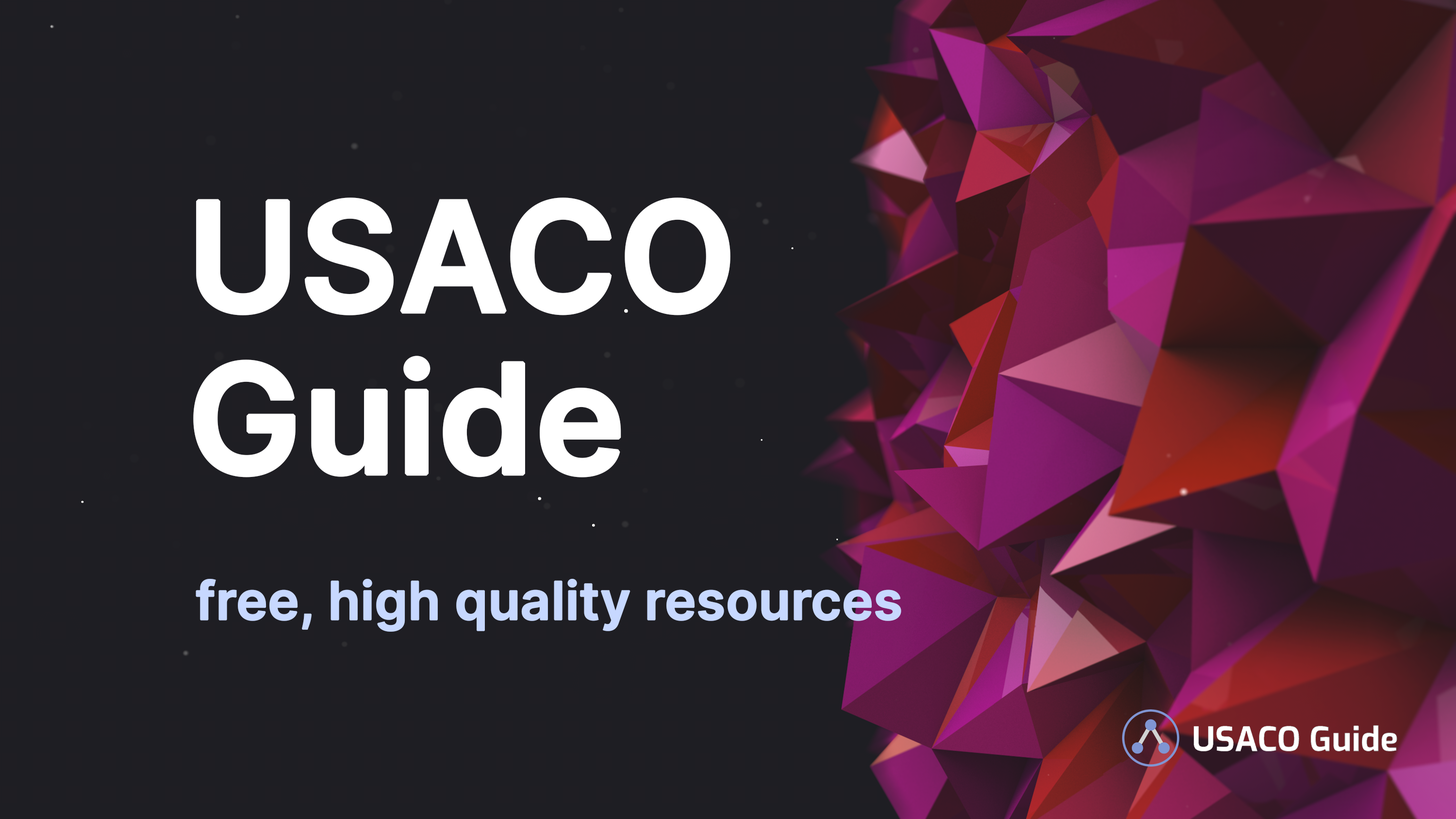
<style>
.page{position:relative;width:1456px;height:819px;background:#1e1e23}
.page>*{position:absolute;margin:0}
.t1{font:151.6px/161.8px "Inter-SemiBold";color:#ffffff;font-weight:bold}
.t2{font:52.6px "Inter-SemiBold";color:#c7d8ff;font-weight:bold}
</style>
<div class="page">
<p class="t1" style="left:193px;top:197px;width:537px;height:280px">USACO <br>Guide</p>
<p class="t2" style="left:196px;top:578px;width:705px;height:54px">free, high quality resources</p>
</div>
